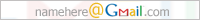
<style>
.page{position:relative;width:200px;height:20px;background:#ffffff}
.page>*{position:absolute;margin:0}
.t1{font:12px "Tahoma";color:#a5a4a4}
.t2{font:18px "Tahoma";color:#edba22}
</style>
<div class="page">
<p class="t1" style="left:35px;top:2px;width:134px;height:16px">namehere<span class="t2">@       </span>.com</p>
</div>
